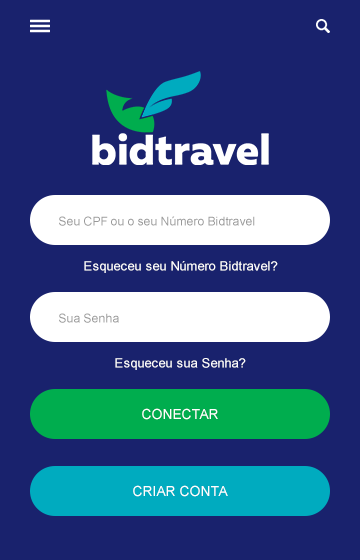
<style>
.page{position:relative;width:360px;height:560px;background:#19226d}
.page>*{position:absolute;margin:0}
.t1{font:12px "ArialMT";color:#999999}
.t2{font:13px "ArialMT";color:#ffffff}
.t3{font:14px "ArialMT";color:#ffffff;text-transform:uppercase}
</style>
<div class="page">
<p class="t1" style="left:59px;top:216px;width:196px;height:10px">Seu CPF ou o seu Número Bidtravel</p>
<p class="t2" style="left:84px;top:261px;width:194px;height:12px">Esqueceu seu Número Bidtravel?</p>
<p class="t1" style="left:59px;top:313px;width:60px;height:10px">Sua Senha</p>
<p class="t2" style="left:115px;top:358px;width:131px;height:12px">Esqueceu sua Senha?</p>
<p class="t3" style="left:142px;top:408px;width:76px;height:12px">Conectar</p>
<p class="t3" style="left:133px;top:485px;width:95px;height:12px">criar conta</p>
</div>
